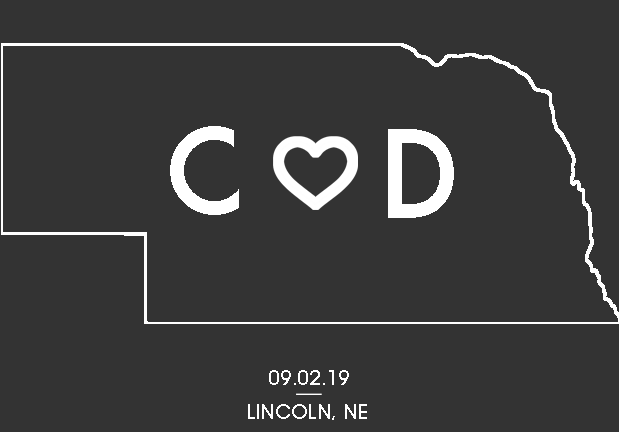
<style>
.page{position:relative;width:619px;height:432px;background:#333333}
.page>*{position:absolute;margin:0}
.t1{font:20px "ITCAvantGardeStd-Md";color:#ffffff}
</style>
<div class="page">
<p class="t1" style="left:269px;top:370px;width:80px;height:15px">09.02.19</p>
<p class="t1" style="left:248px;top:404px;width:119px;height:16px">LINCOLN, NE</p>
</div>
